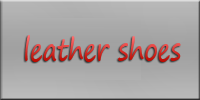
<style>
.page{position:relative;width:200px;height:100px}
.page>*{position:absolute;margin:0}
.t1{font:30px "SegoePrint";letter-spacing:-0.015em;scale:0.84 1}
</style>
<div class="page">
<p class="t1" style="left:25px;top:35px;width:156px;height:27px">leather shoes</p>
</div>
